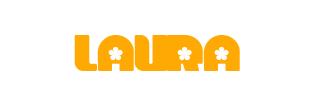
<style>
.page{position:relative;width:320px;height:100px;background:#ffffff}
.page>*{position:absolute;margin:0}
.t1{font:72px "Chick";color:#ffa904}
</style>
<div class="page">
<p class="t1" style="left:74px;top:35px;width:166px;height:36px">LAURA</p>
</div>
